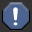
<style>
.page{position:relative;width:32px;height:32px;background:#333333}
.page>*{position:absolute;margin:0}
.t1{font:28px "CourierNewPS-BoldMT";color:#ffffff}
</style>
<div class="page">
<p class="t1" style="left:13px;top:7px;width:5px;height:19px">!</p>
</div>
